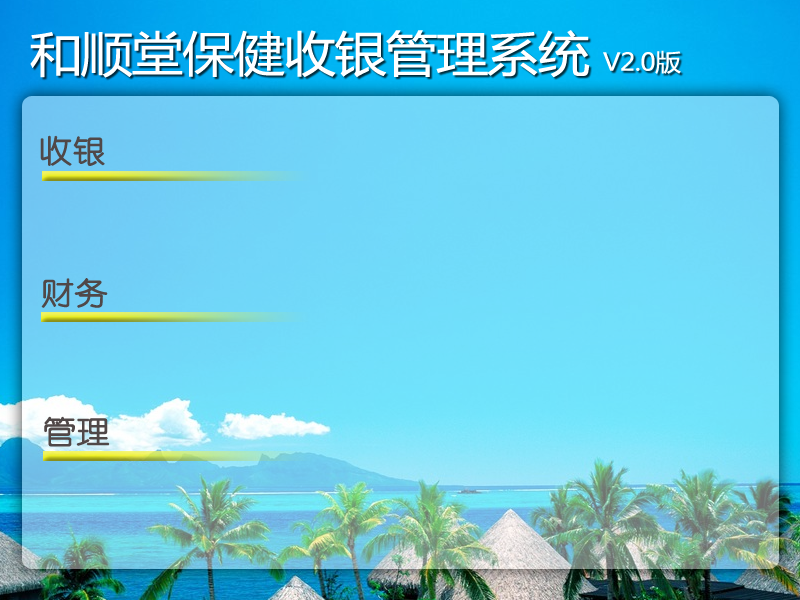
<style>
.page{position:relative;width:800px;height:600px}
.page>*{position:absolute;margin:0}
.t1{font:48px "MicrosoftYaHei";letter-spacing:-0.02em;color:#ffffff;scale:1.08 1}
.t2{font:24px "MicrosoftYaHei";letter-spacing:-0.02em;color:#ffffff;scale:1.08 1}
.t3{font:30.8px "YouYuan";letter-spacing:-0.02em;color:#504848;font-weight:bold;scale:1.08 1}
</style>
<div class="page">
<p class="t1" style="left:30px;top:30px;width:651px;height:48px">和顺堂保健收银管理系统 <span class="t2">V2.0版</span></p>
<p class="t3" style="left:40px;top:135px;width:65px;height:31px">收银</p>
<p class="t3" style="left:41px;top:278px;width:67px;height:30px">财务</p>
<p class="t3" style="left:44px;top:416px;width:66px;height:31px">管理</p>
</div>
